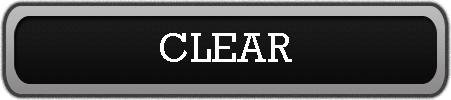
<style>
.page{position:relative;width:451px;height:100px}
.page>*{position:absolute;margin:0}
.t1{font:41.7px "Rockwell";color:#ffffff}
</style>
<div class="page">
<p class="t1" style="left:160px;top:33px;width:132px;height:29px">CLEAR</p>
</div>
